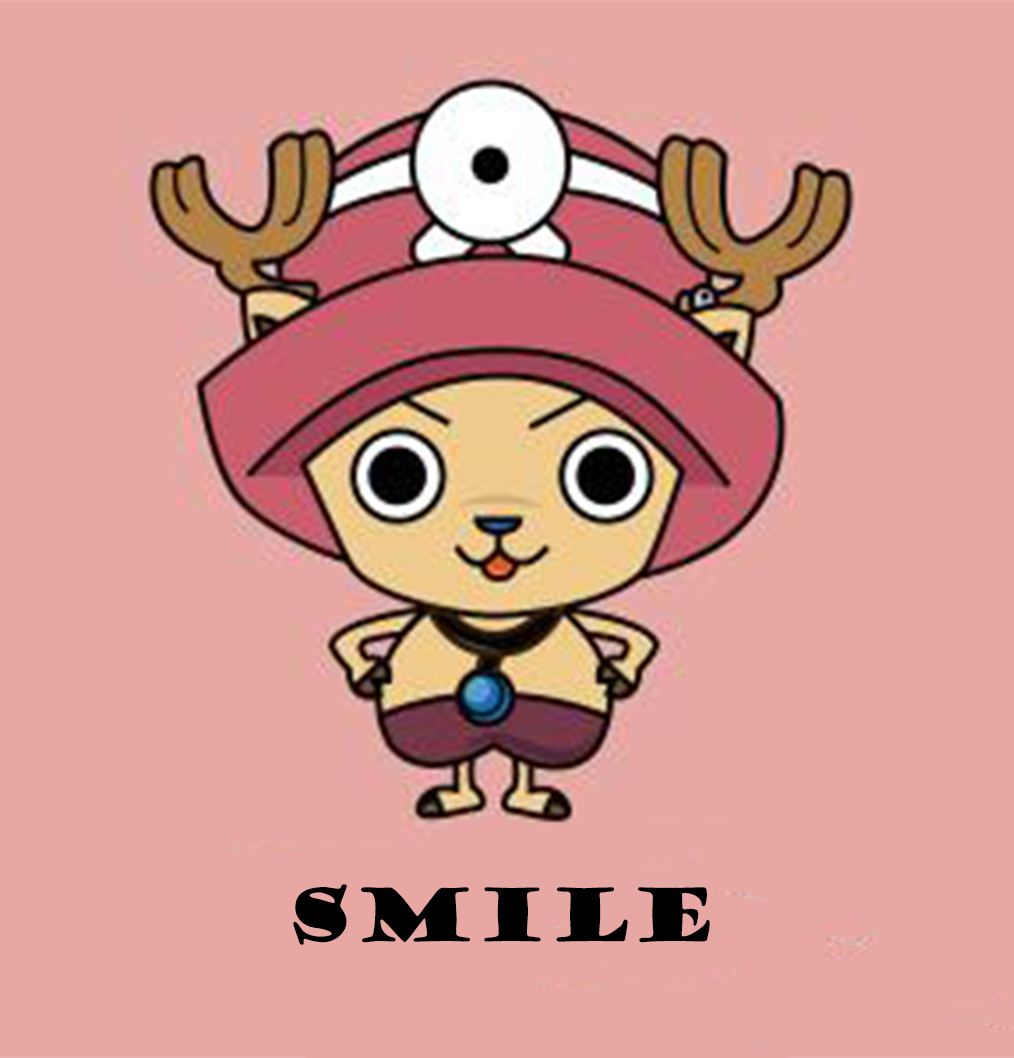
<style>
.page{position:relative;width:1014px;height:1058px;background:#e7a8a3}
.page>*{position:absolute;margin:0}
.t1{font:72px "GoudyStout";color:#000000}
</style>
<div class="page">
<p class="t1" style="left:293px;top:884px;width:417px;height:61px">Smile</p>
</div>
